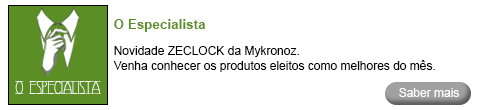
<style>
.page{position:relative;width:485px;height:110px;background:#ffffff}
.page>*{position:absolute;margin:0}
.t1{font:12.6px "Arial-BoldMT";color:#5b8e25;scale:1.07 1}
.t2{font:12px "ArialMT";color:#010101}
.t3{font:13px "Avignon";color:#ffffff}
.t4{font:12px "ArialMT";color:#ffffff}
</style>
<div class="page">
<p class="t1" style="left:114px;top:19px;width:91px;height:13px">O Especialista</p>
<p class="t2" style="left:113px;top:46px;width:322px;height:26px">Novidade ZECLOCK da Mykronoz.<br>Venha conhecer os produtos eleitos como melhores do mês.</p>
<p class="t3" style="left:15px;top:81px;width:86px;height:13px">O ESPECIALISTA</p>
<p class="t4" style="left:399px;top:88px;width:60px;height:9px">Saber mais</p>
</div>
